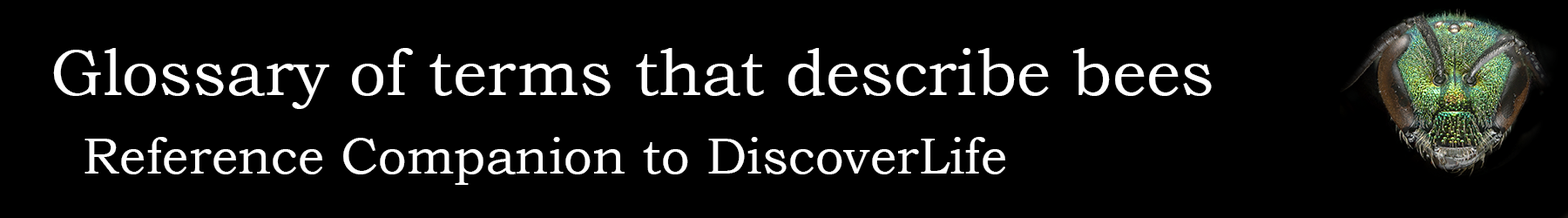
<style>
.page{position:relative;width:1568px;height:218px;background:#000000}
.page>*{position:absolute;margin:0}
.t1{font:65.3px "BookmanOldStyle";color:#ffffff}
.t2{font:50.8px "BookmanOldStyle";color:#ffffff}
</style>
<div class="page">
<p class="t1" style="left:53px;top:48px;width:1159px;height:137px">Glossary of terms that describe bees<br><span class="t2">  Reference Companion to DiscoverLife</span></p>
</div>
